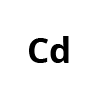
<style>
.page{position:relative;width:100px;height:100px;background:#ffffff}
.page>*{position:absolute;margin:0}
.t1{font:35px "OpenSans-Bold";color:#000000}
</style>
<div class="page">
<p class="t1" style="left:29px;top:36px;width:40px;height:27px">Cd</p>
</div>
